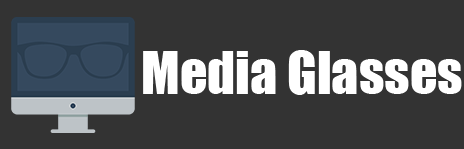
<style>
.page{position:relative;width:464px;height:149px;background:#333333}
.page>*{position:absolute;margin:0}
.t1{font:54px "Impact";color:#ffffff}
</style>
<div class="page">
<p class="t1" style="left:143px;top:50px;width:319px;height:45px">Media Glasses</p>
</div>
